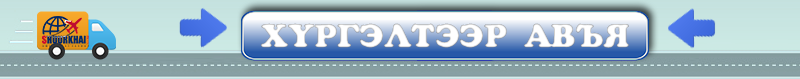
<style>
.page{position:relative;width:800px;height:79px}
.page>*{position:absolute;margin:0}
.t1{font:32.6px "AGCooperMon";color:#ffffff}
</style>
<div class="page">
<p class="t1" style="left:261px;top:23px;width:368px;height:25px">ХҮРГЭЛТЭЭР АВЪЯ</p>
</div>
